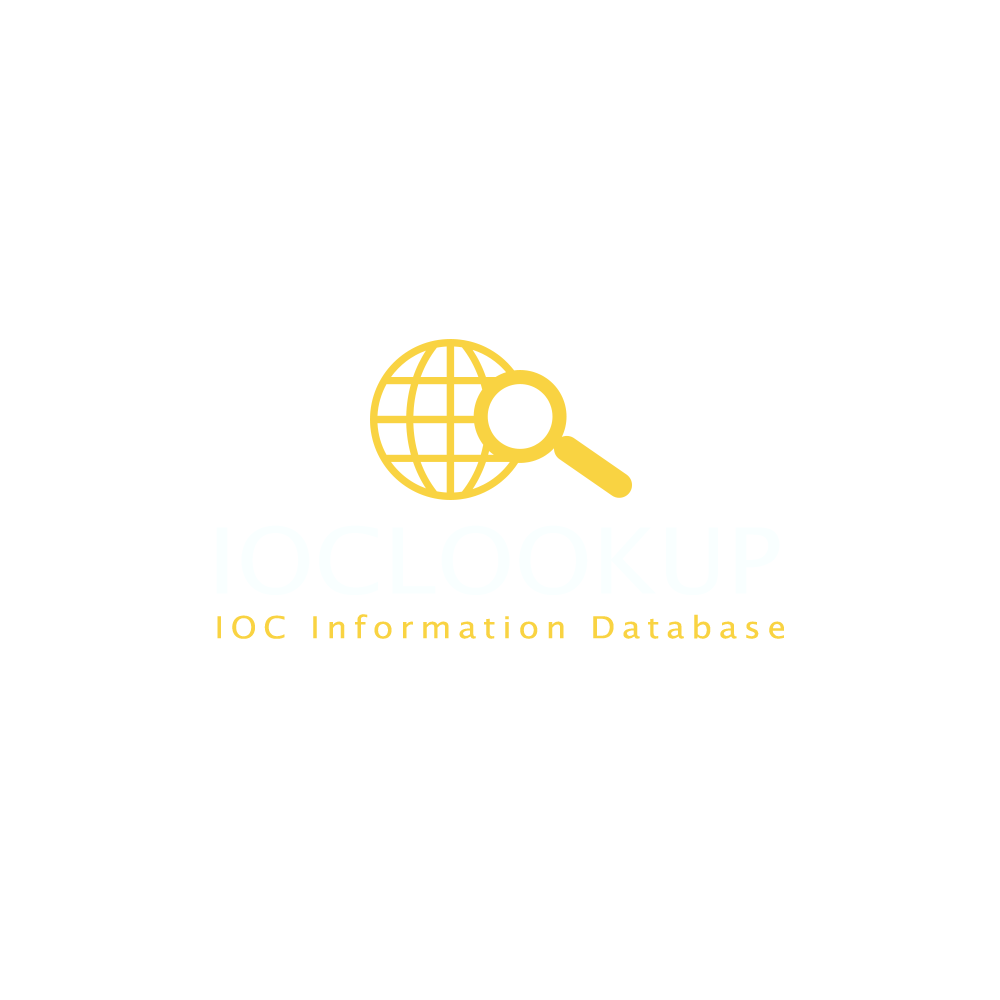
<style>
.page{position:relative;width:1000px;height:1000px;background:#ffffff}
.page>*{position:absolute;margin:0}
.t1{font:91px "LucidaSans";color:#f9ffff;text-transform:uppercase;scale:1.1 1}
.t2{font:30.3px "LucidaSans";letter-spacing:0.2em;color:#f9d342;scale:1.1 1}
</style>
<div class="page">
<p class="t1" style="left:216px;top:525px;width:564px;height:70px">IOCLOOKUP</p>
<p class="t2" style="left:217px;top:614px;width:567px;height:25px">IOC Information Database</p>
</div>
